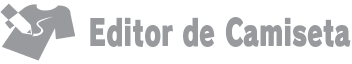
<style>
.page{position:relative;width:352px;height:64px;background:#ffffff}
.page>*{position:absolute;margin:0}
.t1{font:36px "RodinPro-UB";color:#989a9d;scale:0.7 1}
</style>
<div class="page">
<p class="t1" style="left:90px;top:17px;width:261px;height:30px">Editor de Camiseta</p>
</div>
